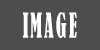
<style>
.page{position:relative;width:100px;height:50px;background:#4d4d4d}
.page>*{position:absolute;margin:0}
.t1{font:32px "BernardMT-Condensed";letter-spacing:0.1em;color:#ffffff;scale:0.63 1}
</style>
<div class="page">
<p class="t1" style="left:23px;top:12px;width:54px;height:26px">IMAGE</p>
</div>
